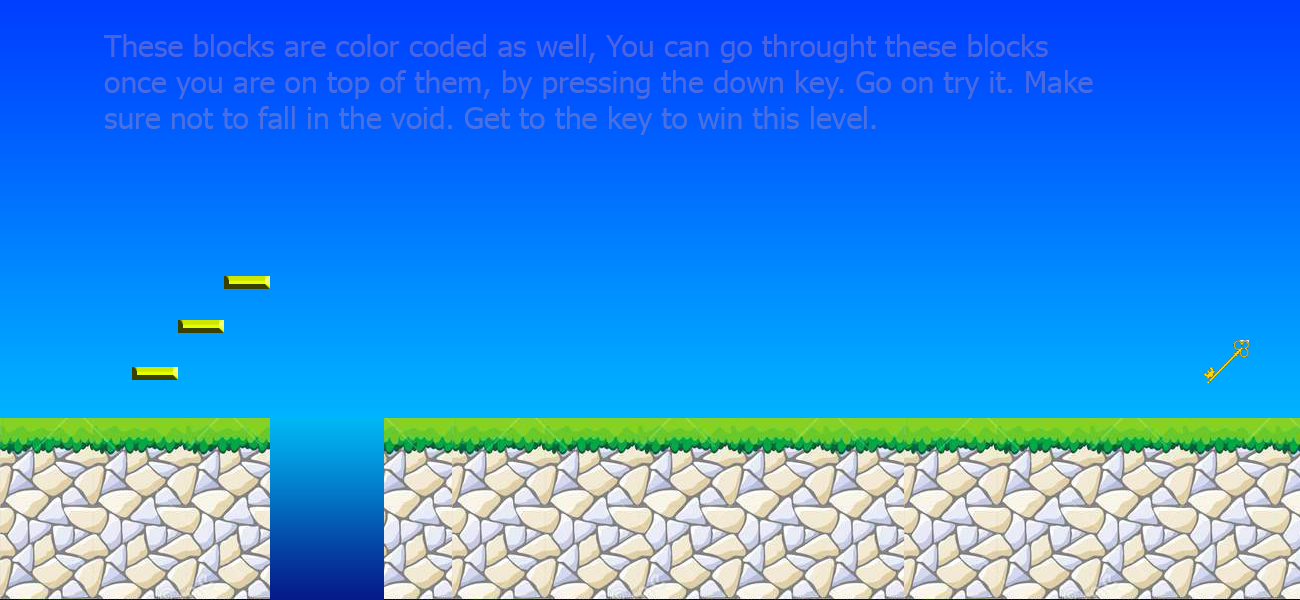
<style>
.page{position:relative;width:1300px;height:600px}
.page>*{position:absolute;margin:0}
.t1{font:30px "Tahoma";color:#4969e1}
</style>
<div class="page">
<p class="t1" style="left:104px;top:34px;width:989px;height:101px">These blocks are color coded as well, You can go throught these blocks once you are on top of them, by pressing the down key. Go on try it. Make sure not to fall in the void. Get to the key to win this level.</p>
</div>
